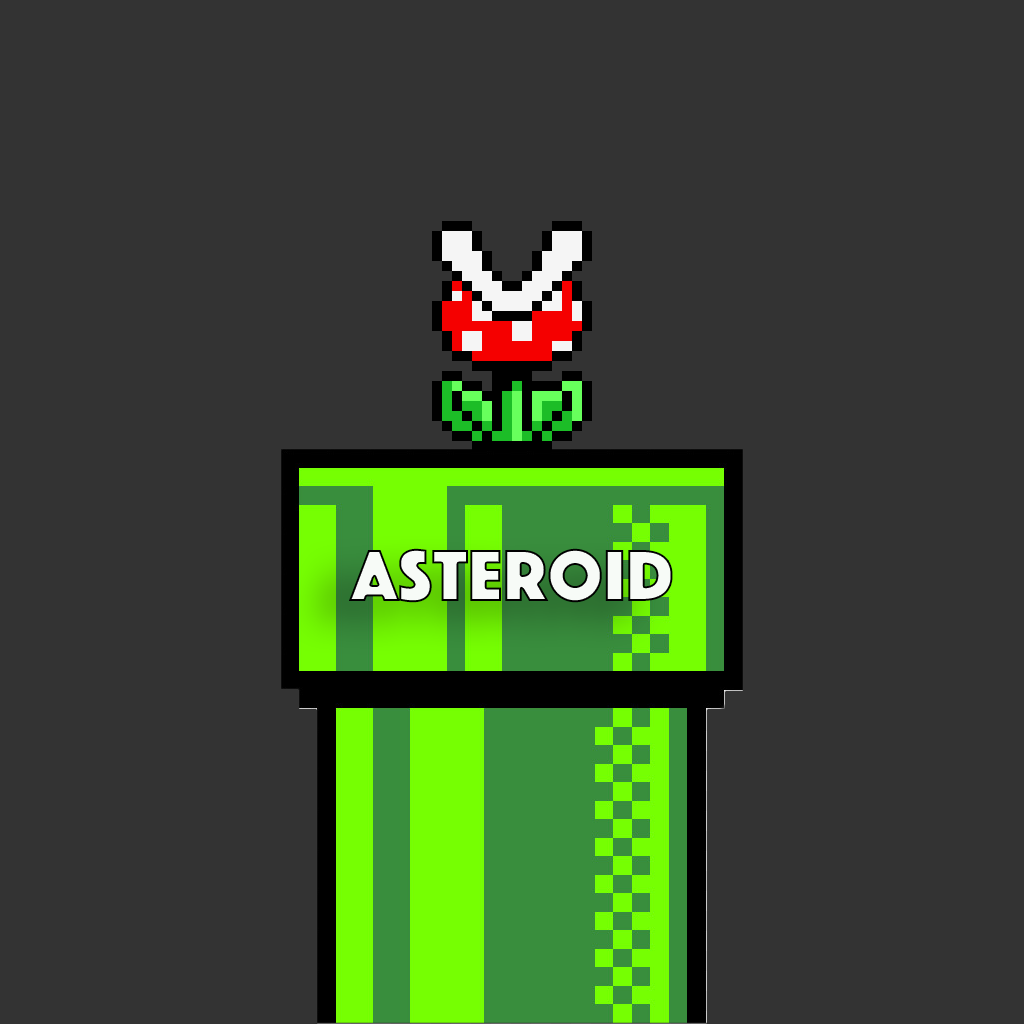
<style>
.page{position:relative;width:1024px;height:1024px;background:#333333}
.page>*{position:absolute;margin:0}
.t1{font:76px "Phosphate-Solid";color:#f7fbf7}
</style>
<div class="page">
<p class="t1" style="left:349px;top:548px;width:324px;height:55px">Asteroid</p>
</div>
